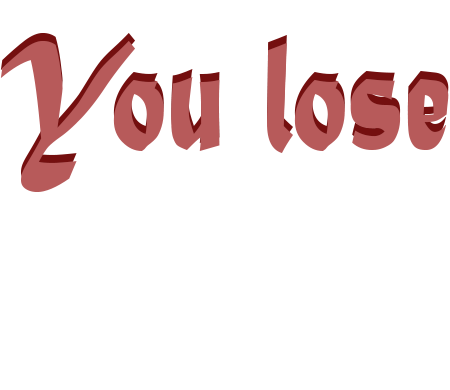
<style>
.page{position:relative;width:450px;height:390px;background:#ffffff}
.page>*{position:absolute;margin:0}
.t1{font:165.5px "MaturaMTScriptCapitals";color:#b75a5a;scale:0.67 1}
</style>
<div class="page">
<p class="t1" style="left:0px;top:33px;width:449px;height:151px">You lose</p>
<p class="t1" style="left:0px;top:41px;width:449px;height:151px">You lose</p>
</div>
